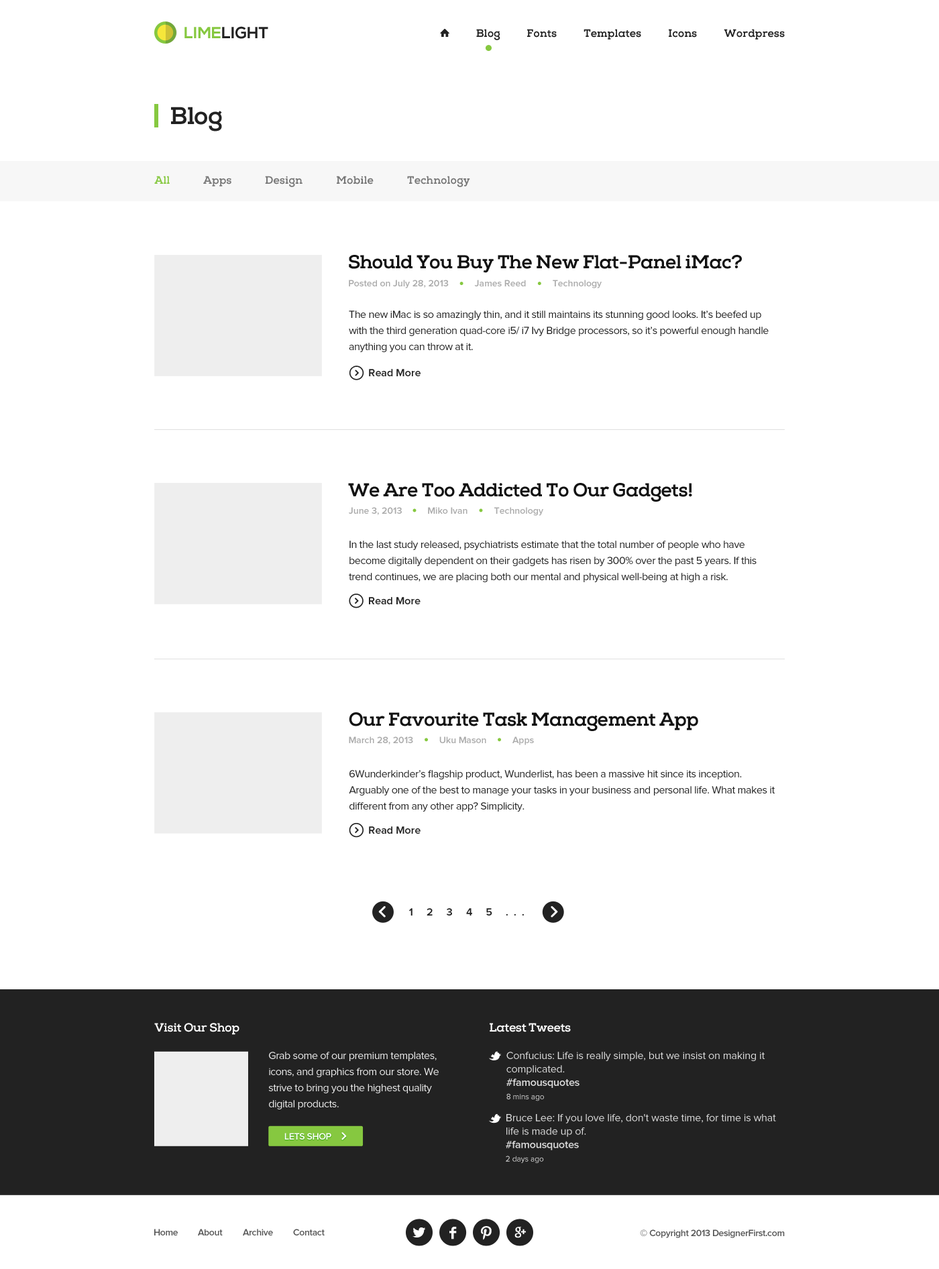
<style>
.page{position:relative;width:939px;height:1269px;background:#ffffff}
.page>*{position:absolute;margin:0}
.t1{font:16.1px "NexaBold";color:#222222;text-transform:uppercase}
.t2{font:16.1px "NexaBold";color:#86c840;text-transform:uppercase}
.t3{font:10.7px "NexaSlab-xBold";color:#222222}
.t4{font:24.2px "NexaSlab-xBold";letter-spacing:-0.025em;color:#222222}
.t5{font:10.7px "NexaSlab-xBold";color:#86c840}
.t6{font:10.7px "NexaSlab-xBold";color:#777777}
.t7{font:18.8px "NexaSlab-xBold";letter-spacing:-0.025em;color:#111111}
.t8{font:9.4px "ProximaNova-Semibold";color:#aaaaaa}
.t9{font:10.7px/16.1px "ProximaNova-Regular";letter-spacing:-0.025em;color:#222222}
.t10{font:10.7px "ProximaNova-Semibold";color:#222222}
.t11{font:10.7px "ProximaNova-Semibold";letter-spacing:0.5em;color:#222222}
.t12{font:12.1px "NexaSlab-xBold";letter-spacing:-0.025em;color:#ffffff}
.t13{font:10.7px/16.1px "ProximaNova-Regular";letter-spacing:-0.025em;color:#eeeeee}
.t14{font:10.7px/13.4px "ProximaNova-Regular";letter-spacing:-0.01em;color:#dcdcdc}
.t15{font:10.7px/13.4px "ProximaNova-Semibold";letter-spacing:-0.01em;color:#dcdcdc}
.t16{font:8.1px/13.4px "ProximaNova-Regular";letter-spacing:-0.01em;color:#dcdcdc}
.t17{font:9.4px "ProximaNova-Semibold";letter-spacing:-0.025em;color:#ffffff;text-transform:uppercase}
.t18{font:9.4px "ProximaNova-Semibold";letter-spacing:-0.025em;color:#555555}
</style>
<div class="page">
<p class="t1" style="left:185px;top:26px;width:83px;height:13px"><span class="t2">Lime</span>Light</p>
<p class="t3" style="left:476px;top:29px;width:25px;height:11px">Blog</p>
<p class="t3" style="left:527px;top:29px;width:30px;height:9px">Fonts</p>
<p class="t3" style="left:584px;top:29px;width:57px;height:11px">Templates</p>
<p class="t3" style="left:669px;top:29px;width:28px;height:9px">Icons</p>
<p class="t3" style="left:724px;top:29px;width:61px;height:11px">Wordpress</p>
<p class="t4" style="left:171px;top:107px;width:51px;height:25px">Blog</p>
<p class="t5" style="left:154px;top:176px;width:16px;height:8px">All</p>
<p class="t6" style="left:203px;top:176px;width:28px;height:11px">Apps</p>
<p class="t6" style="left:265px;top:176px;width:38px;height:11px">Design</p>
<p class="t6" style="left:337px;top:176px;width:37px;height:9px">Mobile</p>
<p class="t6" style="left:407px;top:176px;width:63px;height:11px">Technology</p>
<p class="t7" style="left:349px;top:255px;width:393px;height:18px">Should You Buy The New Flat-Panel iMac?</p>
<p class="t8" style="left:349px;top:280px;width:100px;height:9px">Posted on July 28, 2013</p>
<p class="t8" style="left:474px;top:280px;width:52px;height:6px">James Reed</p>
<p class="t8" style="left:553px;top:280px;width:49px;height:9px">Technology</p>
<p class="t9" style="left:349px;top:311px;width:420px;height:41px">The new iMac is so amazingly thin, and it still maintains its stunning good looks. It’s beefed up with the third generation quad-core i5/ i7 Ivy Bridge processors, so it’s powerful enough handle anything you can throw at it.</p>
<p class="t10" style="left:369px;top:369px;width:52px;height:7px">Read More</p>
<p class="t7" style="left:348px;top:483px;width:344px;height:19px">We Are Too Addicted To Our Gadgets!</p>
<p class="t8" style="left:349px;top:507px;width:53px;height:8px">June 3, 2013</p>
<p class="t8" style="left:428px;top:507px;width:40px;height:7px">Miko Ivan</p>
<p class="t8" style="left:494px;top:507px;width:49px;height:9px">Technology</p>
<p class="t9" style="left:349px;top:541px;width:408px;height:41px">In the last study released, psychiatrists estimate that the total number of people who have become digitally dependent on their gadgets has risen by 300% over the past 5 years. If this trend continues, we are placing both our mental and physical well-being at high a risk.</p>
<p class="t10" style="left:369px;top:597px;width:52px;height:8px">Read More</p>
<p class="t7" style="left:349px;top:713px;width:349px;height:18px">Our Favourite Task Management App</p>
<p class="t8" style="left:349px;top:737px;width:64px;height:8px">March 28, 2013</p>
<p class="t8" style="left:439px;top:737px;width:47px;height:6px">Uku Mason</p>
<p class="t8" style="left:513px;top:737px;width:21px;height:8px">Apps</p>
<p class="t9" style="left:349px;top:770px;width:427px;height:42px">6Wunderkinder’s flagship product, Wunderlist, has been a massive hit since its inception. Arguably one of the best to manage your tasks in your business and personal life. What makes it different from any other app? Simplicity.</p>
<p class="t10" style="left:369px;top:827px;width:52px;height:7px">Read More</p>
<p class="t11" style="left:409px;top:908px;width:115px;height:8px">1 2 3 4 5 ...</p>
<p class="t12" style="left:154px;top:1023px;width:86px;height:12px">Visit Our Shop</p>
<p class="t12" style="left:490px;top:1023px;width:81px;height:10px">Latest Tweets</p>
<p class="t13" style="left:268px;top:1052px;width:171px;height:58px">Grab some of our premium templates, icons, and graphics from our store. We strive to bring you the highest quality digital products.</p>
<p class="t14" style="left:507px;top:1052px;width:259px;height:50px">Confucius: Life is really simple, but we insist on making it complicated. <br><span class="t15">#famousquotes<br></span><span class="t16">8 mins ago</span></p>
<p class="t14" style="left:506px;top:1114px;width:270px;height:49px">Bruce Lee: If you love life, don't waste time, for time is what life is made up of. <br><span class="t15">#famousquotes<br></span><span class="t16">2 days ago</span></p>
<p class="t17" style="left:284px;top:1133px;width:47px;height:7px">Lets Shop</p>
<p class="t18" style="left:154px;top:1229px;width:24px;height:7px">Home</p>
<p class="t18" style="left:198px;top:1229px;width:25px;height:7px">About</p>
<p class="t18" style="left:243px;top:1229px;width:30px;height:7px">Archive</p>
<p class="t18" style="left:293px;top:1229px;width:32px;height:7px">Contact</p>
<p class="t18" style="left:640px;top:1230px;width:145px;height:9px">© Copyright 2013 DesignerFirst.com</p>
</div>
